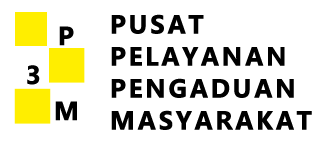
<style>
.page{position:relative;width:321px;height:152px;background:#ffffff}
.page>*{position:absolute;margin:0}
.t1{font:26px/32px "SegoeUI-Bold";letter-spacing:0.078em;color:#000000;font-weight:bold}
.t2{font:26px "SegoeUI-Bold";letter-spacing:0.078em;color:#000000;font-weight:bold}
</style>
<div class="page">
<p class="t1" style="left:111px;top:14px;width:201px;height:116px">PUSAT<br>PELAYANAN<br>PENGADUAN<br>MASYARAKAT</p>
<p class="t2" style="left:59px;top:26px;width:15px;height:20px">P</p>
<p class="t2" style="left:27px;top:65px;width:13px;height:20px">3</p>
<p class="t2" style="left:55px;top:101px;width:22px;height:20px">M</p>
</div>
